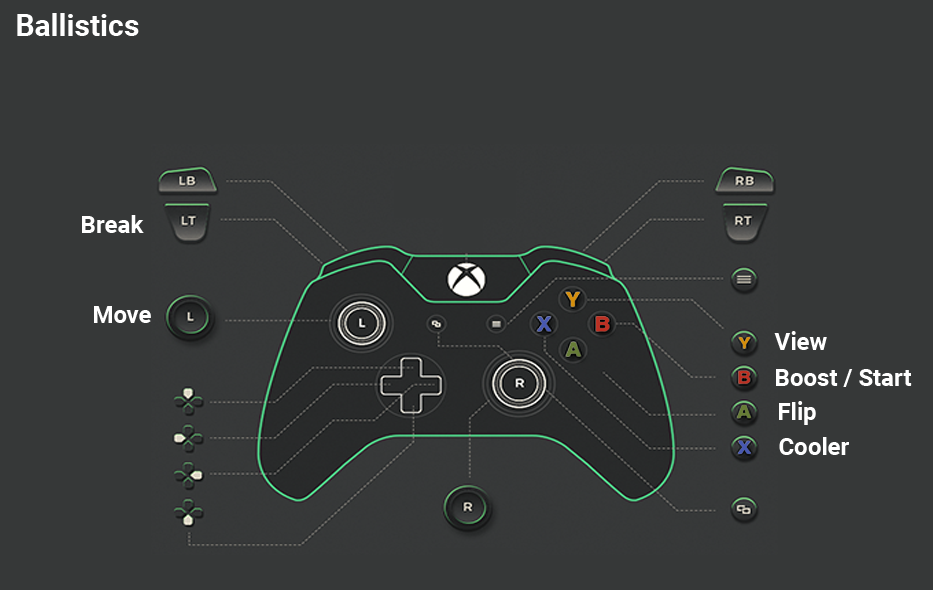
<style>
.page{position:relative;width:933px;height:590px;background:#363838}
.page>*{position:absolute;margin:0}
.t1{font:30px "Roboto-Bold";color:#ffffff}
.t2{font:24px "Roboto-Bold";color:#ffffff}
</style>
<div class="page">
<p class="t1" style="left:17px;top:13px;width:122px;height:23px">Ballistics</p>
<p class="t2" style="left:82px;top:215px;width:62px;height:18px">Break</p>
<p class="t2" style="left:94px;top:306px;width:57px;height:17px">Move</p>
<p class="t2" style="left:774px;top:331px;width:53px;height:19px">View</p>
<p class="t2" style="left:776px;top:369px;width:136px;height:18px">Boost / Start</p>
<p class="t2" style="left:779px;top:401px;width:37px;height:24px">Flip</p>
<p class="t2" style="left:779px;top:437px;width:70px;height:18px">Cooler</p>
</div>
